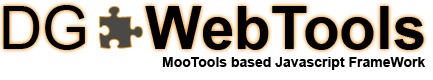
<style>
.page{position:relative;width:433px;height:80px;background:#ffffff}
.page>*{position:absolute;margin:0}
.t1{font:60px "ArialMT";color:#000000}
.t2{font:60px "Arial-BoldMT";color:#000000}
.t3{font:14px "Arial-BoldMT";color:#000000}
</style>
<div class="page">
<p class="t1" style="left:3px;top:5px;width:82px;height:45px">DG</p>
<p class="t2" style="left:145px;top:6px;width:279px;height:44px">WebTools</p>
<p class="t3" style="left:162px;top:57px;width:263px;height:13px">MooTools based Javascript FrameWork</p>
</div>
